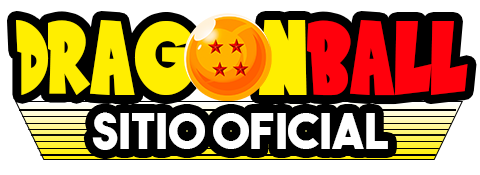
<style>
.page{position:relative;width:480px;height:175px;background:#000000}
.page>*{position:absolute;margin:0}
.t1{font:124.2px "SaiyanSans";color:#ffee00}
.t2{font:124.2px "SaiyanSans";color:#ff000c}
.t3{font:49.2px "TheBoldFont";color:#ffffff}
</style>
<div class="page">
<p class="t1" style="left:16px;top:20px;width:452px;height:76px">drag n<span class="t2">ball</span></p>
<p class="t3" style="left:92px;top:112px;width:296px;height:38px">sitio oficial</p>
</div>
